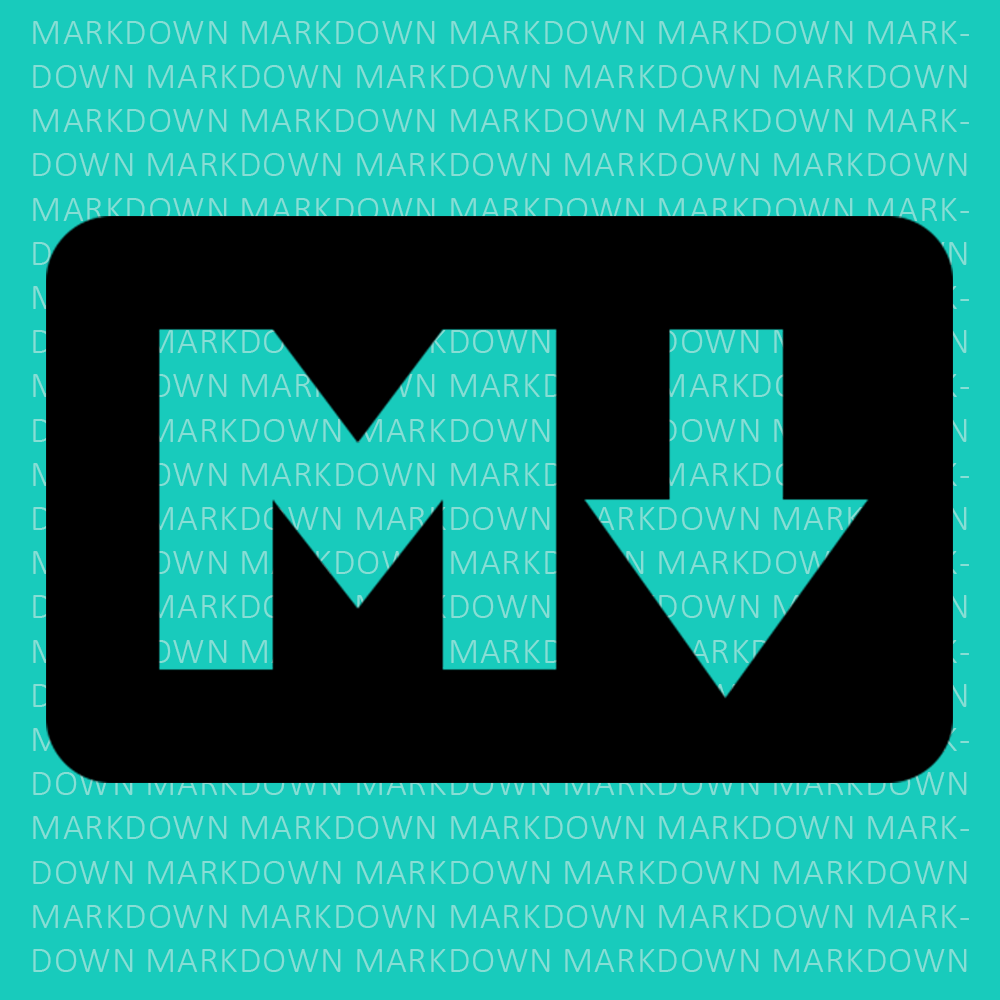
<style>
.page{position:relative;width:1000px;height:1000px;background:#18cbbc}
.page>*{position:absolute;margin:0}
.t1{font:36.8px "Calibri-Light";letter-spacing:0.025em}
</style>
<div class="page">
<p class="t1" style="left:33px;top:21px;width:936px;height:951px;text-align:center">MARKDOWN MARKDOWN MARKDOWN MARKDOWN MARKDOWN MARKDOWN MARKDOWN MARKDOWN MARKDOWN MARKDOWN MARKDOWN MARKDOWN MARKDOWN MARKDOWN MARKDOWN MARKDOWN MARKDOWN MARKDOWN MARKDOWN MARKDOWN MARKDOWN MARKDOWN MARKDOWN MARKDOWN MARKDOWN MARKDOWN MARKDOWN MARKDOWN MARKDOWN MARKDOWN MARKDOWN MARKDOWN MARKDOWN MARKDOWN MARKDOWN MARKDOWN MARKDOWN MARKDOWN MARKDOWN MARKDOWN MARKDOWN MARKDOWN MARKDOWN MARKDOWN MARKDOWN MARKDOWN MARKDOWN MARKDOWN MARKDOWN MARKDOWN MARKDOWN MARKDOWN MARKDOWN MARKDOWN MARKDOWN MARKDOWN MARKDOWN MARKDOWN MARKDOWN MARKDOWN MARKDOWN MARKDOWN MARKDOWN MARKDOWN MARKDOWN MARKDOWN MARKDOWN MARKDOWN MARKDOWN MARKDOWN MARKDOWN MARKDOWN MARKDOWN MARKDOWN MARKDOWN MARKDOWN MARKDOWN MARKDOWN MARKDOWN MARKDOWN MARKDOWN MARKDOWN MARKDOWN MARKDOWN MARKDOWN MARKDOWN MARKDOWN MARKDOWN MARKDOWN MARKDOWN MARKDOWN MARKDOWN MARKDOWN MARKDOWN MARKDOWN MARKDOWN MARKDOWN MARKDOWN MARKDOWN MARKDOWN MARKDOWN MARKDOWN MARKDOWN MARKDOWN MARKDOWN MARKDOWN MARKDOWN MARKDOWN MARKDOWN MARKDOWN</p>
</div>
